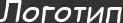
<style>
.page{position:relative;width:123px;height:23px;background:#333333}
.page>*{position:absolute;margin:0}
.t1{font:30px "ComicSansMS-Italic";color:#ffffff}
</style>
<div class="page">
<p class="t1" style="left:0px;top:0px;width:122px;height:23px">Логотип</p>
</div>
